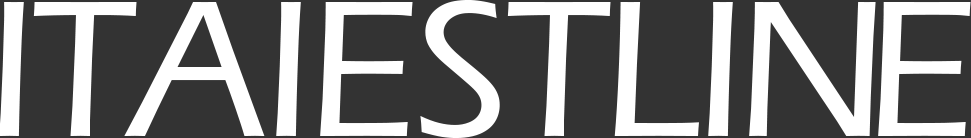
<style>
.page{position:relative;width:971px;height:138px;background:#333333}
.page>*{position:absolute;margin:0}
.t1{font:200.7px "ErasITC-Medium";letter-spacing:-0.03em;color:#ffffff}
</style>
<div class="page">
<p class="t1" style="left:0px;top:0px;width:971px;height:138px">ITAIESTLINE</p>
</div>
